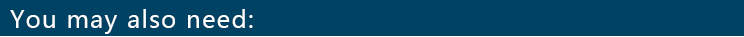
<style>
.page{position:relative;width:744px;height:37px;background:#004263}
.page>*{position:absolute;margin:0}
.t1{font:24px "MicrosoftYaHei";letter-spacing:0.05em;color:#ffffff}
</style>
<div class="page">
<p class="t1" style="left:10px;top:9px;width:243px;height:25px">You may also need:</p>
</div>
